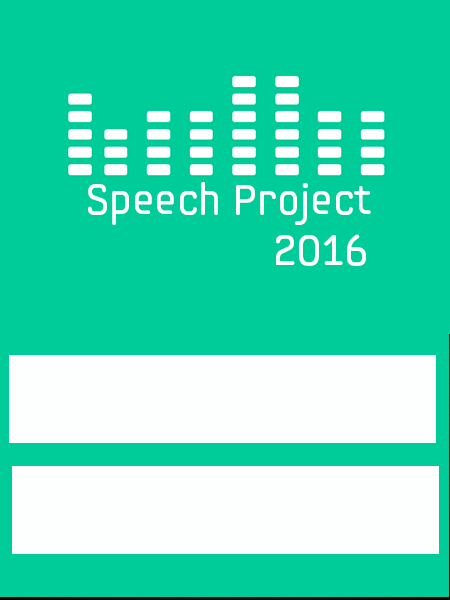
<style>
.page{position:relative;width:450px;height:600px;background:#00cc99}
.page>*{position:absolute;margin:0}
.t1{font:42.4px "SamsungImaginationModern";color:#fdffff}
</style>
<div class="page">
<p class="t1" style="left:88px;top:182px;width:283px;height:84px">Speech Project<br>      2016</p>
</div>
